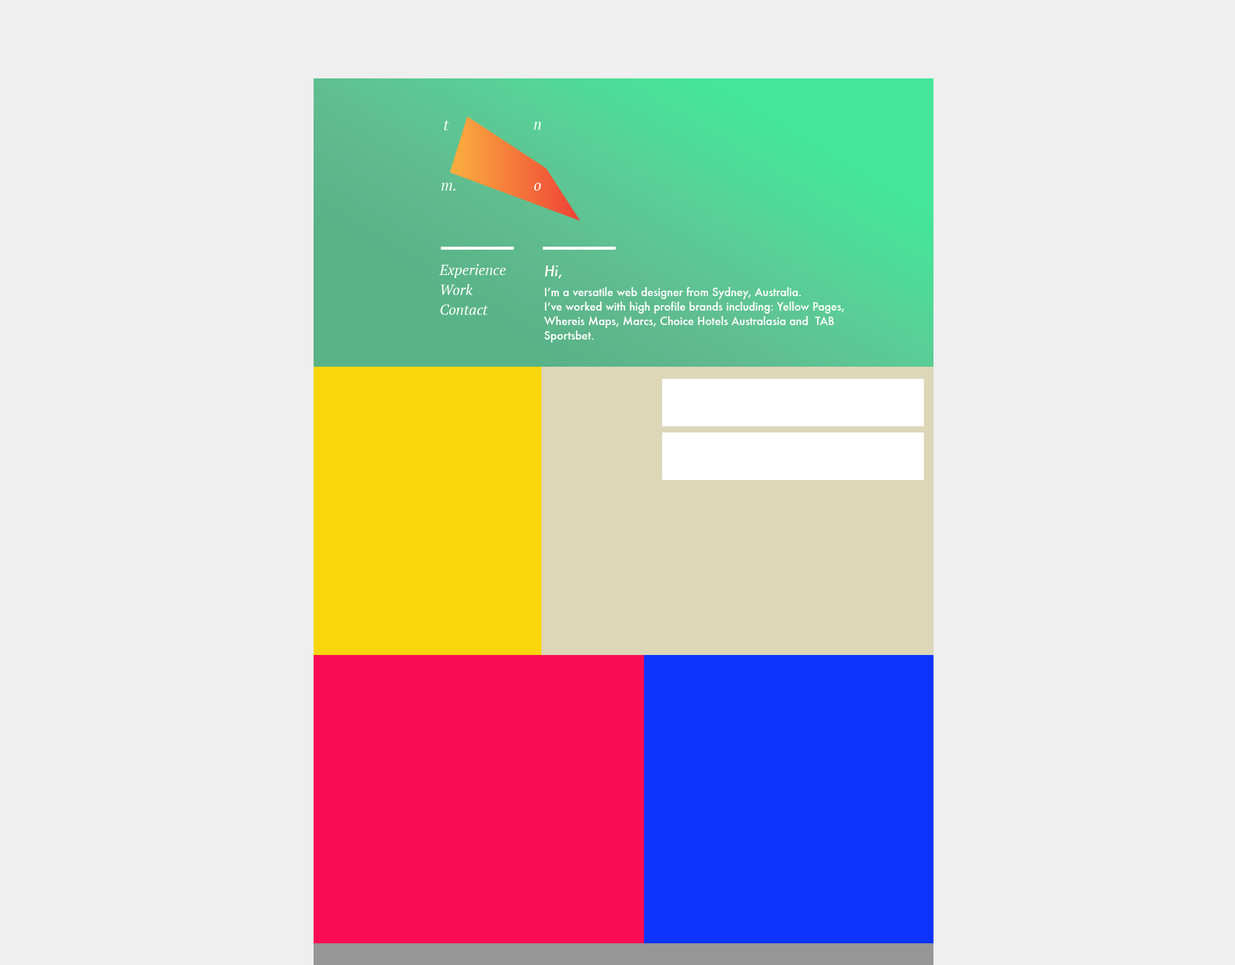
<style>
.page{position:relative;width:1235px;height:965px;background:#efefef}
.page>*{position:absolute;margin:0}
.t1{font:14.5px/19.9px "PTSerif-Italic";color:#ffffff}
.t2{font:10.8px/14.5px "Futura-Medium";color:#ffffff}
.t3{font:14.5px/19.9px "Futura-MediumItalic";color:#ffffff}
.t4{font:14.5px/19.9px "Futura-Medium";color:#ffffff}
.t5{font:10.8px/19.9px "Futura-Medium";color:#ffffff}
</style>
<div class="page">
<p class="t1" style="left:439px;top:264px;width:67px;height:51px">Experience<br>Work<br>Contact</p>
<p class="t2" style="left:544px;top:265px;width:301px;height:78px"><span class="t3">Hi</span><span class="t4">,<br></span><span class="t5">I’m a versatile web designer from Sydney, Australia. <br></span>I’ve worked with high profile brands including: Yellow Pages, Whereis Maps, Marcs, Choice Hotels Australasia and  TAB Sportsbet.</p>
</div>
